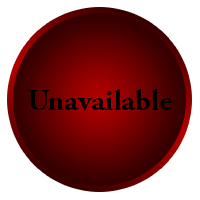
<style>
.page{position:relative;width:200px;height:200px;background:#ffffff}
.page>*{position:absolute;margin:0}
.t1{font:30px "AGaramondPro-Bold";color:#000000}
</style>
<div class="page">
<p class="t1" style="left:28px;top:89px;width:145px;height:22px">Unavailable</p>
</div>
